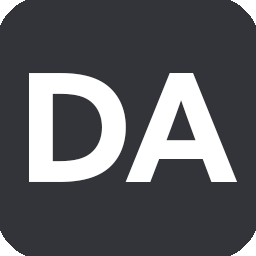
<style>
.page{position:relative;width:256px;height:256px;background:#333439}
.page>*{position:absolute;margin:0}
.t1{font:150px "AzoSans-Bold";color:#ffffff}
</style>
<div class="page">
<p class="t1" style="left:29px;top:73px;width:208px;height:109px">DA</p>
</div>
